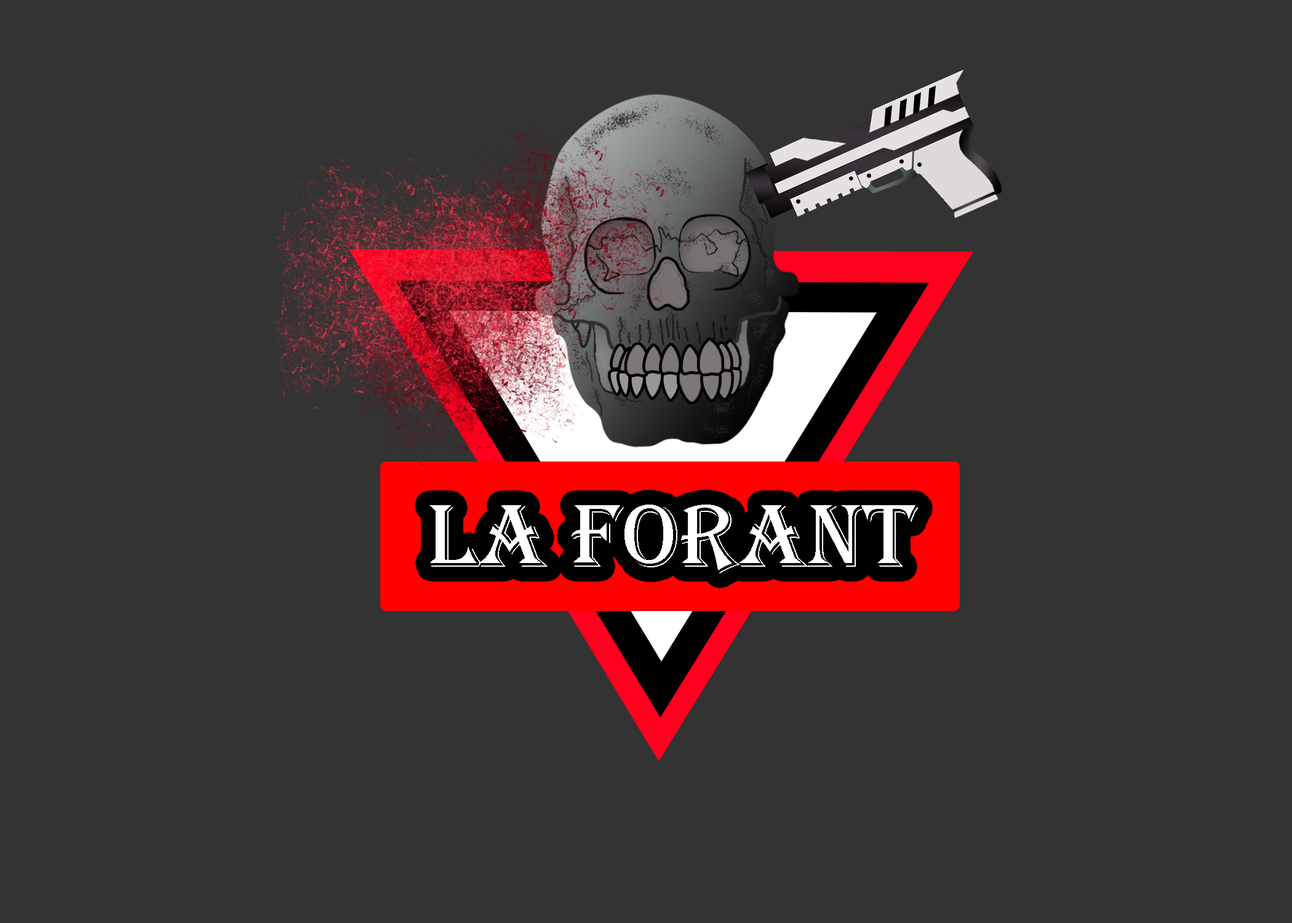
<style>
.page{position:relative;width:1292px;height:923px;background:#333333}
.page>*{position:absolute;margin:0}
.t1{font:92.3px "Algerian";color:#ffffff}
</style>
<div class="page">
<p class="t1" style="left:429px;top:505px;width:489px;height:68px">LA FORANT</p>
</div>
